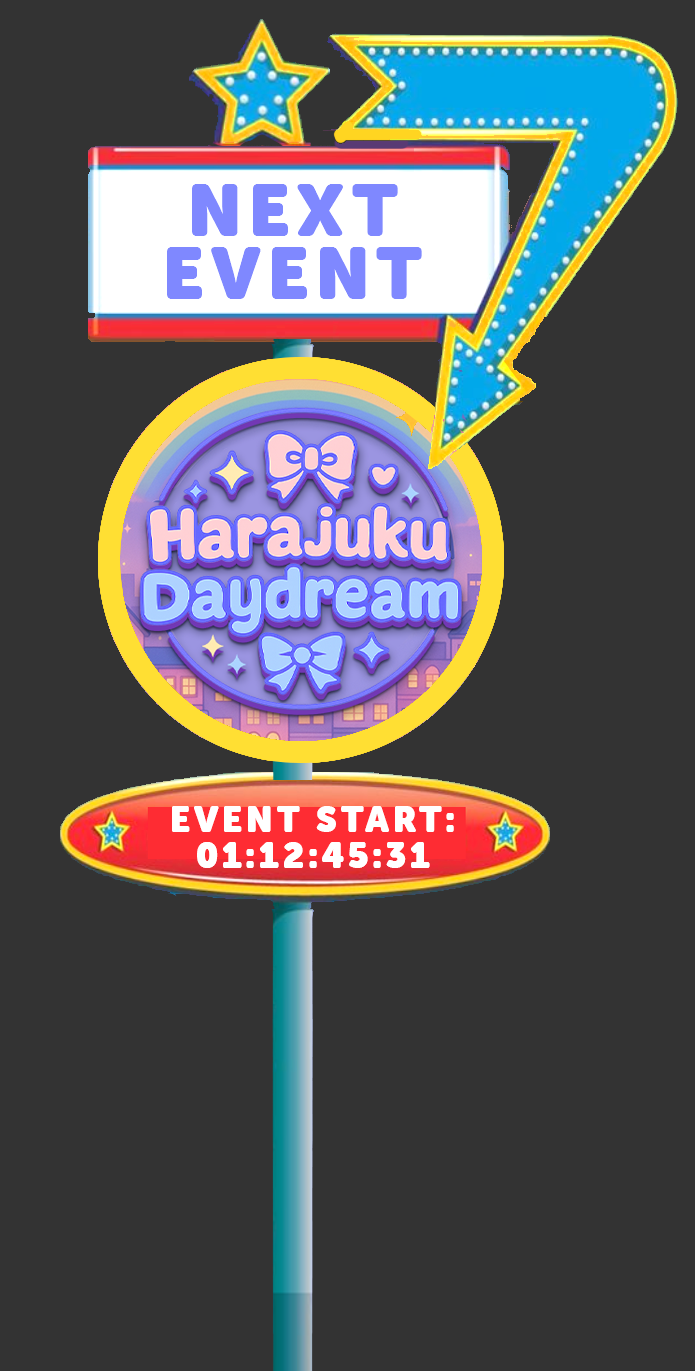
<style>
.page{position:relative;width:695px;height:1371px;background:#333333}
.page>*{position:absolute;margin:0}
.t1{font:72.7px/63.7px "MuseoSansRounded-1000";letter-spacing:0.1em;color:#7f88ff;text-transform:uppercase}
.t2{font:36.4px/36px "MuseoSansRounded-1000";letter-spacing:0.1em;color:#ffffff;text-transform:uppercase}
</style>
<div class="page">
<p class="t1" style="left:167px;top:184px;width:255px;height:115px;text-align:center">Next<br>Event</p>
<p class="t2" style="left:172px;top:806px;width:282px;height:62px;text-align:center">EVENT START:<br>01:12:45:31</p>
</div>
